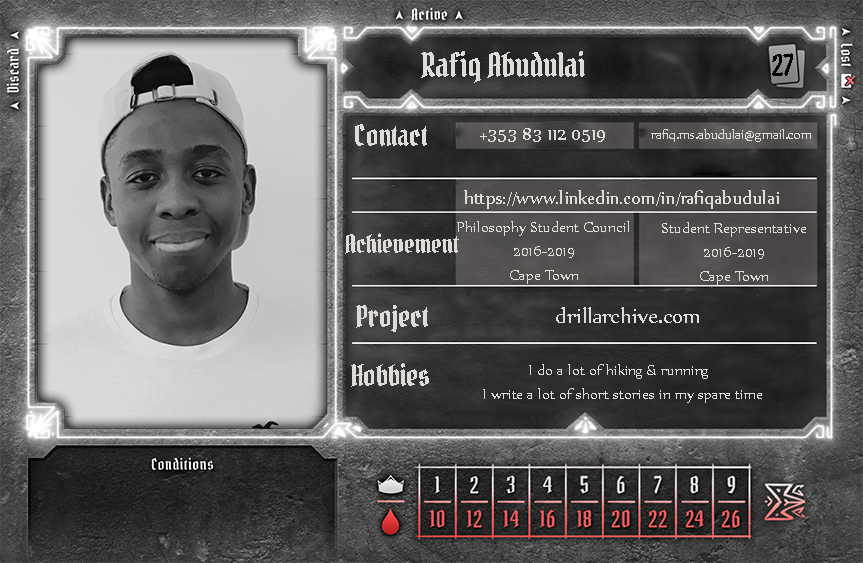
<style>
.page{position:relative;width:863px;height:563px}
.page>*{position:absolute;margin:0}
.t1{font:33.3px "PirataOne-Regular";color:#dedbd9}
.t2{font:29.2px "PirataOne-Regular";color:#030405}
.t3{font:29.2px "PirataOne-Regular";color:#dedbd9}
.t4{font:20.8px "Nyala-Regular";color:#dedbd9}
.t5{font:14.6px "Nyala-Regular";color:#dedbd9}
.t6{font:16.7px "Nyala-Regular";color:#dedbd9}
.t7{font:25px "PirataOne-Regular";color:#dedbd9}
.t8{font:25px "Nyala-Regular";color:#dedbd9}
</style>
<div class="page">
<p class="t1" style="left:421px;top:51px;width:164px;height:32px">Rafiq Abudulai</p>
<p class="t2" style="left:772px;top:53px;width:21px;height:23px">27</p>
<p class="t3" style="left:355px;top:124px;width:72px;height:22px">Contact</p>
<p class="t4" style="left:480px;top:128px;width:125px;height:14px">+353 83 112 0519</p>
<p class="t5" style="left:651px;top:129px;width:160px;height:13px">rafiq.ms.abudulai@gmail.com</p>
<p class="t4" style="left:464px;top:190px;width:315px;height:19px">https://www.linkedin.com/in/rafiqabudulai</p>
<p class="t6" style="left:457px;top:221px;width:172px;height:63px;text-align:center">Philosophy Student Council<br>2016-2019<br>Cape Town</p>
<p class="t6" style="left:662px;top:222px;width:144px;height:63px;text-align:center">Student Representative<br>2016-2019<br>Cape Town</p>
<p class="t7" style="left:345px;top:233px;width:114px;height:21px">Achievement</p>
<p class="t3" style="left:356px;top:305px;width:72px;height:27px">Project</p>
<p class="t8" style="left:556px;top:307px;width:143px;height:16px">drillarchive.com</p>
<p class="t3" style="left:351px;top:363px;width:78px;height:24px">Hobbies</p>
<p class="t6" style="left:483px;top:364px;width:279px;height:39px;text-align:center">I do a lot of hiking &amp; running  <br>I write a lot of short stories in my spare time</p>
</div>
